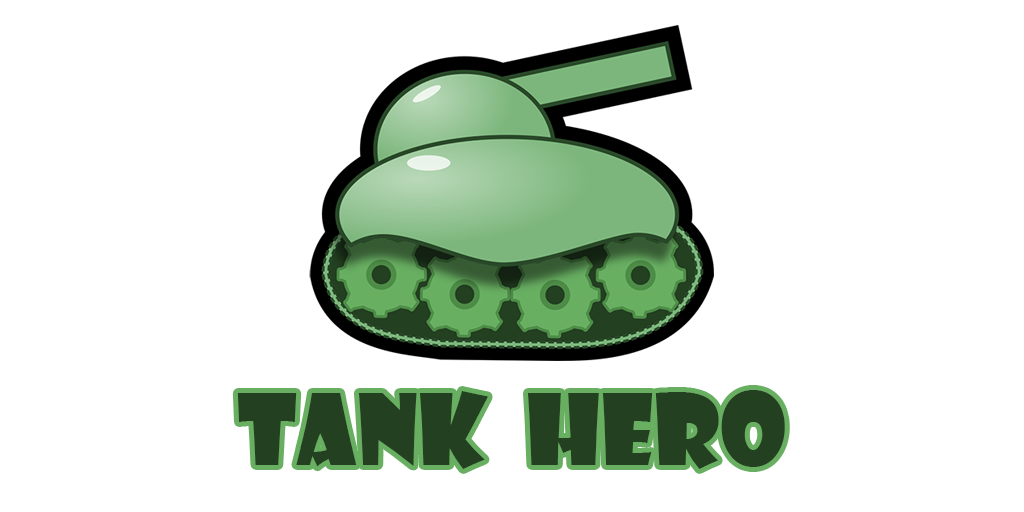
<style>
.page{position:relative;width:1024px;height:512px;background:#ffffff}
.page>*{position:absolute;margin:0}
.t1{font:96px "ShowcardGothic-Reg";color:#234021}
</style>
<div class="page">
<p class="t1" style="left:237px;top:390px;width:548px;height:79px">TANK  HERO</p>
</div>
